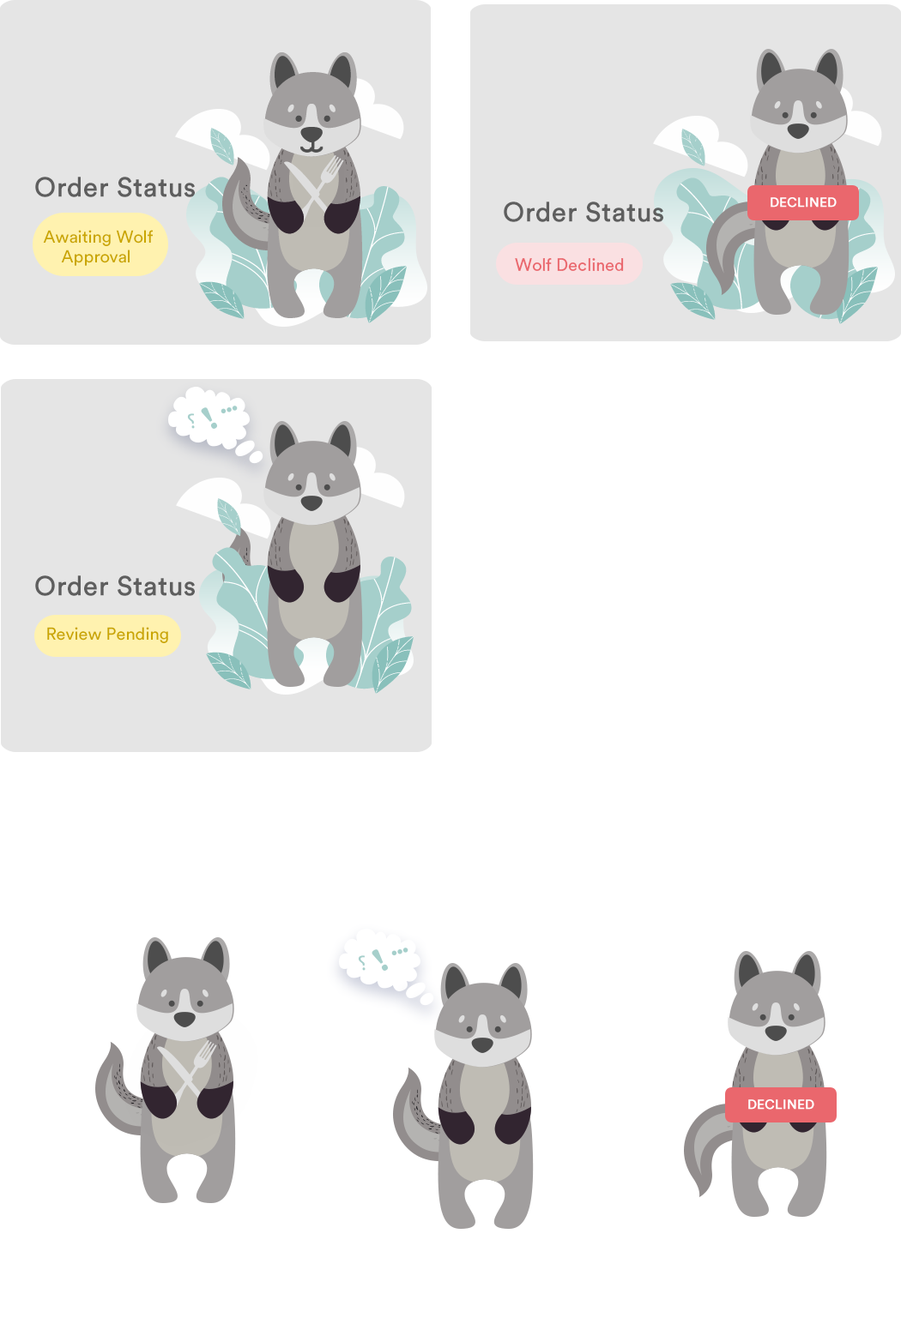
<style>
.page{position:relative;width:901px;height:1324px;background:#ffffff}
.page>*{position:absolute;margin:0}
.t1{font:26.6px "CircularStd-Book";color:#494949;font-weight:bold}
.t2{font:12.9px "CircularStd-Book";color:#ffffff;font-weight:bold}
.t3{font:17.2px/19px "CircularStd-Book";color:#caa600}
.t4{font:17.2px "CircularStd-Book";color:#ea676d}
.t5{font:17.2px "CircularStd-Book";color:#caa600}
</style>
<div class="page">
<p class="t1" style="left:35px;top:177px;width:160px;height:20px;opacity:0.9">Order Status</p>
<p class="t2" style="left:770px;top:197px;width:66px;height:11px">DECLINED</p>
<p class="t1" style="left:503px;top:202px;width:160px;height:20px;opacity:0.9">Order Status</p>
<p class="t3" style="left:43px;top:230px;width:110px;height:36px;text-align:center">Awaiting Wolf Approval</p>
<p class="t4" style="left:515px;top:258px;width:108px;height:13px">Wolf Declined</p>
<p class="t1" style="left:35px;top:575px;width:160px;height:21px;opacity:0.9">Order Status</p>
<p class="t5" style="left:47px;top:627px;width:121px;height:16px">Review Pending</p>
<p class="t2" style="left:748px;top:1099px;width:66px;height:11px">DECLINED</p>
</div>
